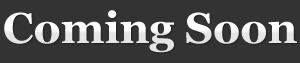
<style>
.page{position:relative;width:300px;height:63px;background:#333333}
.page>*{position:absolute;margin:0}
.t1{font:43px "Georgia-Bold";color:#f2f2f2}
</style>
<div class="page">
<p class="t1" style="left:4px;top:10px;width:293px;height:43px">Coming Soon</p>
</div>
